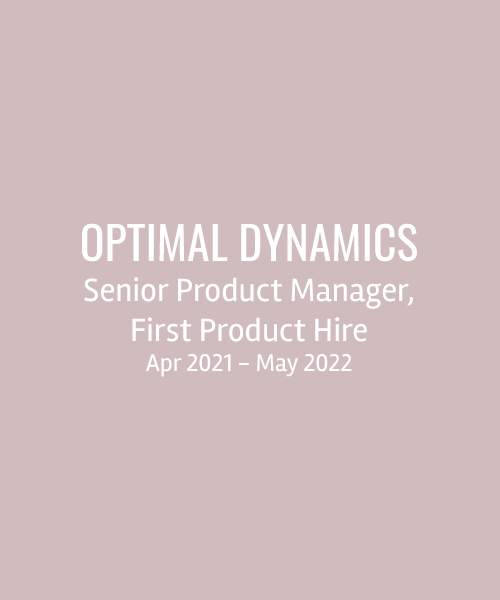
<style>
.page{position:relative;width:500px;height:600px;background:#d0bbbd}
.page>*{position:absolute;margin:0}
.t1{font:33.3px "Rambla-Regular";color:#ffffff}
.t2{font:45.8px "Oswald-Regular";color:#ffffff}
.t3{font:25px "Rambla-Regular";color:#ffffff}
</style>
<div class="page">
<p class="t1" style="left:82px;top:223px;width:335px;height:154px;text-align:center"><span class="t2">OPTIMAL DYNAMICS<br></span>Senior Product Manager,<br>First Product Hire<br><span class="t3">Apr 2021 - May 2022</span></p>
</div>
